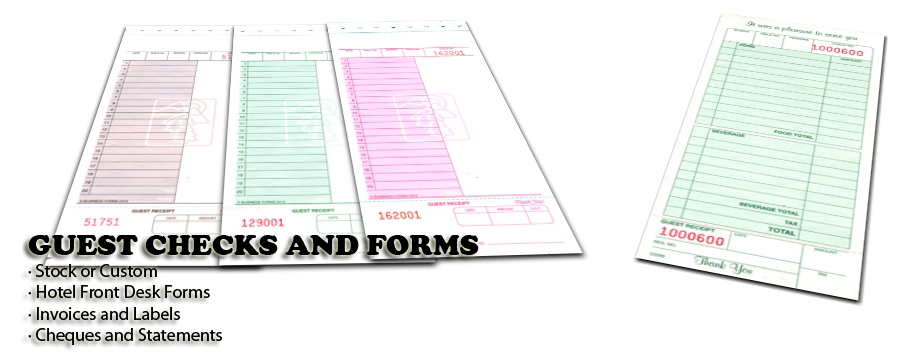
<style>
.page{position:relative;width:900px;height:360px;background:#ffffff}
.page>*{position:absolute;margin:0}
.t1{font:18px "MyriadPro-Regular";color:#000000}
.t2{font:30px "CooperBlack";color:#000000}
</style>
<div class="page">
<p class="t1" style="left:28px;top:235px;width:451px;height:110px"><span class="t2">GUEST CHECKS AND FORMS<br></span>· Stock or Custom<br>· Hotel Front Desk Forms<br>· Invoices and Labels<br>· Cheques and Statements</p>
</div>
